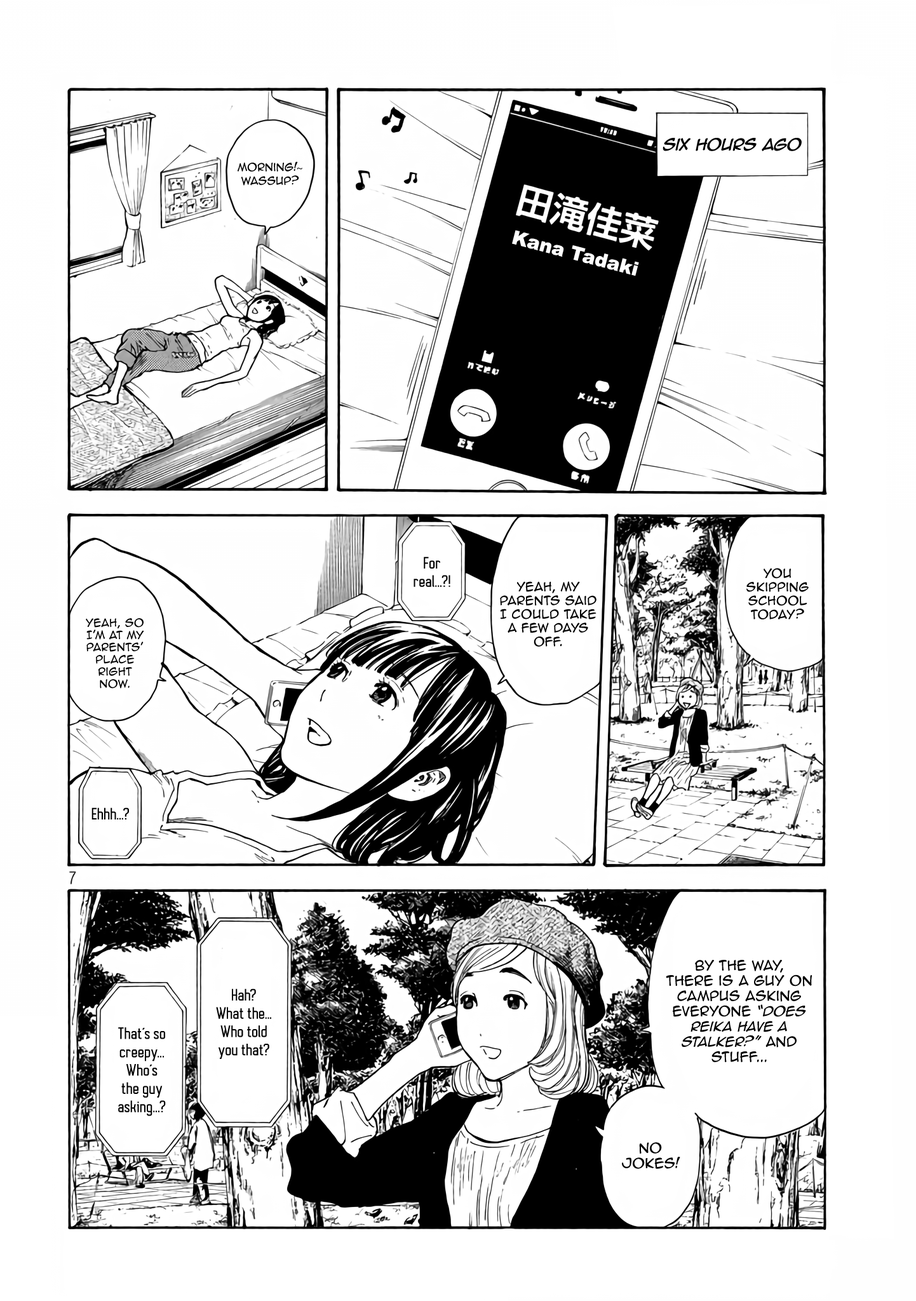
<style>
.page{position:relative;width:916px;height:1301px;background:#ffffff}
.page>*{position:absolute;margin:0}
.t1{font:15.3px "AnimeAce2.0BB-Italic";color:#000000}
.t2{font:10.2px "AnimeAce2.0BB";color:#000000}
.t3{font:10.2px "MyriadPro-Regular";color:#000000}
.t4{font:19.1px "Arial-Black";color:#ffffff}
.t5{font:15.3px "AutobusBold";color:#000000}
.t6{font:11.4px "AnimeAce2.0BB";color:#000000}
.t7{font:12.7px "AnimeAce2.0BB";color:#000000}
.t8{font:12.7px "AnimeAce2.0BB-Italic";color:#000000}
</style>
<div class="page">
<p class="t1" style="left:663px;top:138px;width:139px;height:13px">Six hours ago</p>
<p class="t2" style="left:238px;top:161px;width:64px;height:25px;text-align:center">Morning!<span class="t3">~<br></span>wassup?</p>
<p class="t4" style="left:512px;top:230px;width:127px;height:46px;rotate:15deg">Kana Tadaki</p>
<p class="t5" style="left:414px;top:557px;width:37px;height:30px;text-align:center">For real...?!</p>
<p class="t6" style="left:747px;top:568px;width:62px;height:52px;text-align:center">You skipping school today?</p>
<p class="t6" style="left:500px;top:581px;width:97px;height:66px;text-align:center">Yeah, My parents said I could take<br>a few days<br>off.</p>
<p class="t2" style="left:86px;top:618px;width:58px;height:71px;text-align:center">Yeah, so I’m at my parents’ place right now.</p>
<p class="t5" style="left:92px;top:808px;width:37px;height:12px">Ehhh...?</p>
<p class="t7" style="left:666px;top:960px;width:147px;height:102px;text-align:center">By the way,<br>there is a guy on campus asking everyone <span class="t8">“does Reika have a stalker?”</span> and stuff...</p>
<p class="t5" style="left:216px;top:989px;width:55px;height:70px;text-align:center">Hah?<br>What the...<br>Who told<br>you that?</p>
<p class="t5" style="left:118px;top:1027px;width:48px;height:89px;text-align:center">That’s so creepy... Who’s the guy asking...?</p>
<p class="t7" style="left:622px;top:1143px;width:59px;height:26px;text-align:center">No jokes!</p>
</div>
